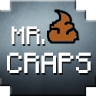
<style>
.page{position:relative;width:96px;height:96px}
.page>*{position:absolute;margin:0}
.t1{font:20px "Minecraftia";color:#ffffff}
.t2{font:23px "Minecraftia";color:#ffffff}
</style>
<div class="page">
<p class="t1" style="left:11px;top:26px;width:34px;height:18px">MR.</p>
<p class="t2" style="left:7px;top:52px;width:84px;height:21px">CRAPS</p>
</div>
